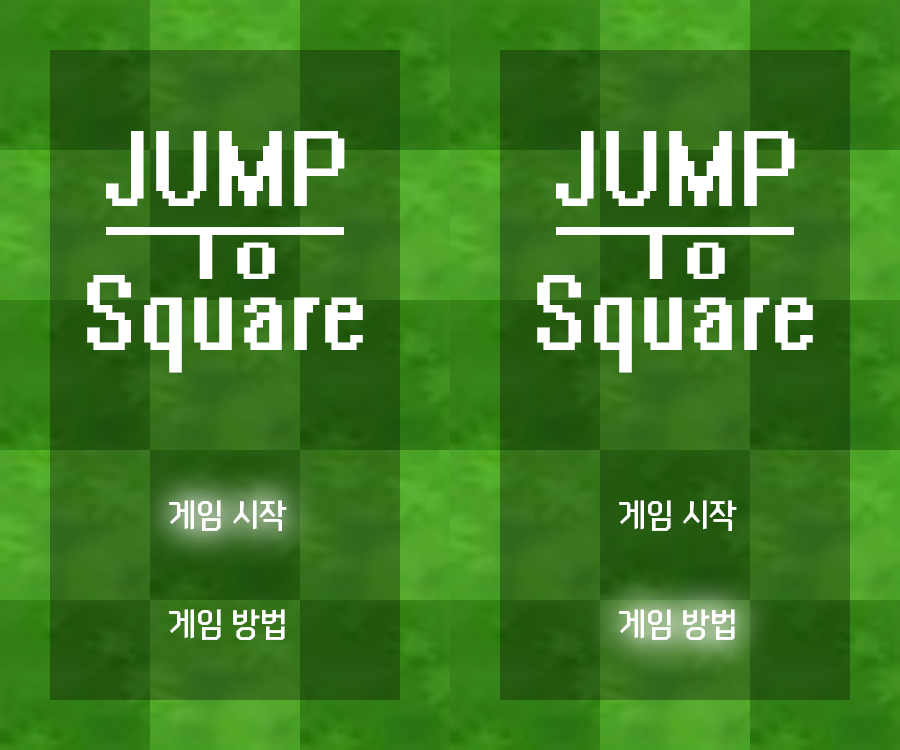
<style>
.page{position:relative;width:900px;height:750px}
.page>*{position:absolute;margin:0}
.t1{font:120px/28.8px "System";color:#ffffff;scale:0.83 1}
.t2{font:33.6px "NEXONFootballGothicL";color:#ffffff}
</style>
<div class="page">
<p class="t1" style="left:87px;top:131px;width:276px;height:242px;text-align:center">JUMP<br><br><br><br><br>Square</p>
<p class="t1" style="left:537px;top:131px;width:276px;height:242px;text-align:center">JUMP<br><br><br><br><br>Square</p>
<p class="t2" style="left:169px;top:500px;width:118px;height:31px">게임 시작</p>
<p class="t2" style="left:619px;top:500px;width:118px;height:31px">게임 시작</p>
<p class="t2" style="left:169px;top:609px;width:116px;height:31px">게임 방법</p>
<p class="t2" style="left:619px;top:609px;width:116px;height:31px">게임 방법</p>
</div>
